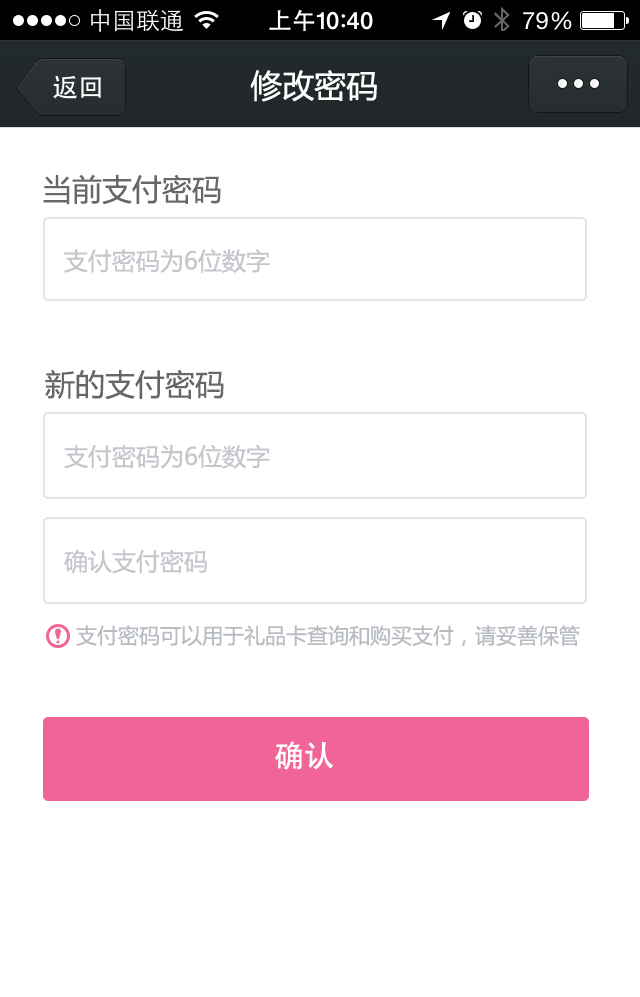
<style>
.page{position:relative;width:640px;height:997px;background:#ffffff}
.page>*{position:absolute;margin:0}
.t1{font:32px "MicrosoftYaHei";color:#ffffff}
.t2{font:30px "MicrosoftYaHei";color:#676767}
.t3{font:24px "MicrosoftYaHei";color:#c3c6cb}
.t4{font:21px "MicrosoftYaHei";color:#b7bbc2}
.t5{font:30px "AdobeHeitiStd-Regular";color:#ffffff}
</style>
<div class="page">
<p class="t1" style="left:250px;top:70px;width:127px;height:32px">修改密码</p>
<p class="t2" style="left:43px;top:174px;width:178px;height:31px">当前支付密码</p>
<p class="t3" style="left:64px;top:249px;width:206px;height:24px">支付密码为6位数字</p>
<p class="t2" style="left:45px;top:369px;width:179px;height:31px">新的支付密码</p>
<p class="t3" style="left:64px;top:444px;width:206px;height:25px">支付密码为6位数字</p>
<p class="t3" style="left:64px;top:549px;width:143px;height:25px">确认支付密码</p>
<p class="t4" style="left:76px;top:625px;width:504px;height:21px">支付密码可以用于礼品卡查询和购买支付，请妥善保管</p>
<p class="t5" style="left:275px;top:741px;width:59px;height:29px">确认</p>
</div>
